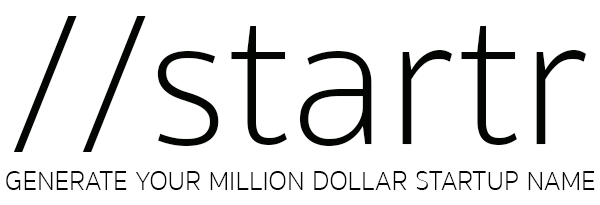
<style>
.page{position:relative;width:600px;height:205px;background:#ffffff}
.page>*{position:absolute;margin:0}
.t1{font:190px "SukhumvitSet-Thin";color:#030503}
.t2{font:27px "SukhumvitSet-Thin";color:#030503}
</style>
<div class="page">
<p class="t1" style="left:13px;top:16px;width:573px;height:136px">//startr</p>
<p class="t2" style="left:6px;top:171px;width:589px;height:19px">GENERATE YOUR MILLION DOLLAR STARTUP NAME</p>
</div>
